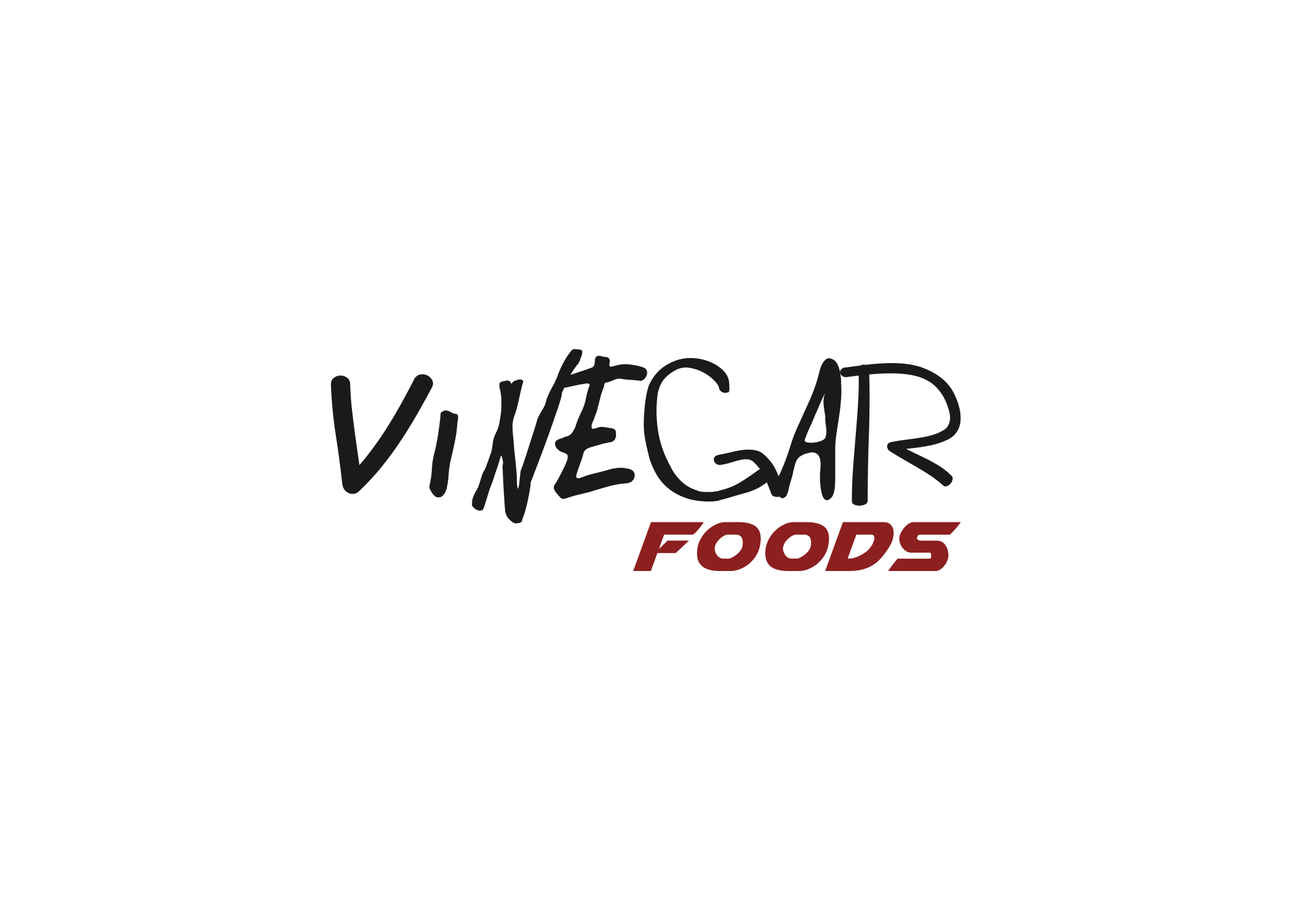
<style>
.page{position:relative;width:1292px;height:923px;background:#ffffff}
.page>*{position:absolute;margin:0}
.t1{font:202.5px "CASEYNEISTAT";letter-spacing:0.015em;color:#1a1a1a}
.t2{font:92.3px "Airstrike";letter-spacing:0.015em;color:#8c1f1f}
</style>
<div class="page">
<p class="t1" style="left:330px;top:349px;width:631px;height:175px">Vinegar</p>
<p class="t2" style="left:633px;top:522px;width:328px;height:49px">FOODS</p>
</div>
